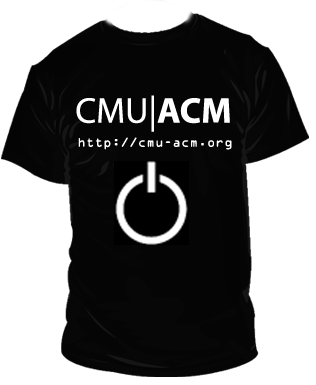
<style>
.page{position:relative;width:316px;height:385px;background:#ffffff}
.page>*{position:absolute;margin:0}
.t1{font:36px "MyriadPro-Regular";color:#ffffff}
.t2{font:36px "MyriadPro-Bold";color:#ffffff}
.t3{font:12px "OCRAStd";color:#ffffff}
</style>
<div class="page">
<p class="t1" style="left:76px;top:95px;width:154px;height:37px">CMU|<span class="t2">ACM</span></p>
<p class="t3" style="left:78px;top:137px;width:154px;height:13px">http://cmu-acm.org</p>
</div>
